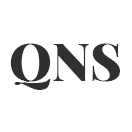
<style>
.page{position:relative;width:132px;height:132px;background:#ffffff}
.page>*{position:absolute;margin:0}
.t1{font:52px "PlayfairDisplay-Black";color:#30302f}
</style>
<div class="page">
<p class="t1" style="left:10px;top:43px;width:110px;height:47px">QNS</p>
</div>
